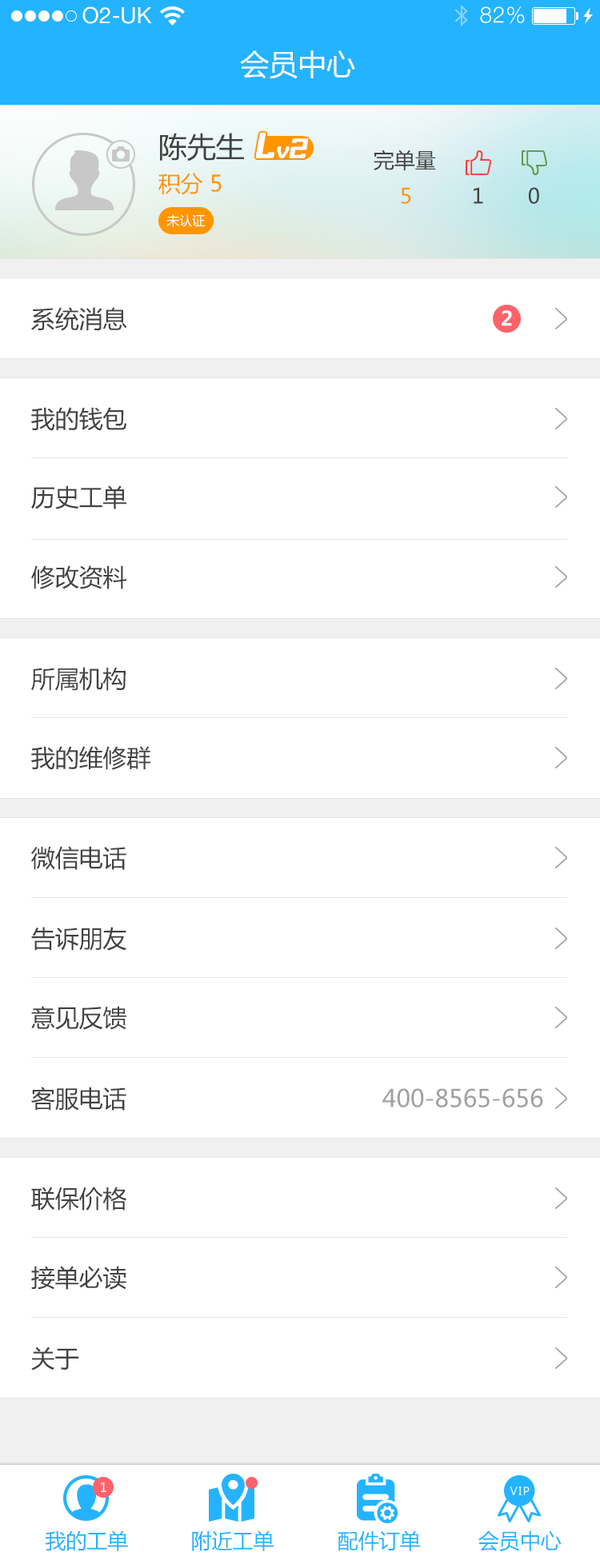
<style>
.page{position:relative;width:600px;height:1568px;background:#ffffff}
.page>*{position:absolute;margin:0}
.t1{font:28.8px "MicrosoftYaHei";color:#ffffff}
.t2{font:28.8px "MicrosoftYaHei";color:#424242}
.t3{font:31.8px "BabyUniverseItalic";letter-spacing:-0.01em;color:#fffefe}
.t4{font:19.5px "BabyUniverseItalic";letter-spacing:0.05em;color:#fffefe}
.t5{font:24.4px "BabyUniverseItalic";letter-spacing:0.05em;color:#fffefe}
.t6{font:20.8px "MicrosoftYaHei";color:#424242}
.t7{font:22.4px "MicrosoftYaHei";color:#ff9600}
.t8{font:20.8px "MicrosoftYaHei";color:#ff9600}
.t9{font:13px "MicrosoftYaHei";color:#ffffff}
.t10{font:24px "MicrosoftYaHei";color:#424242}
.t11{font:19.8px "MicrosoftYaHei-Bold";color:#ffffff}
.t12{font:24px "MicrosoftYaHei";color:#a0a0a0}
.t13{font:12.8px "MicrosoftYaHei";color:#ffffff}
.t14{font:20.8px "MicrosoftYaHei";color:#24b3ff}
</style>
<div class="page">
<p class="t1" style="left:240px;top:50px;width:115px;height:29px">会员中心</p>
<p class="t2" style="left:160px;top:133px;width:84px;height:29px">陈先生</p>
<p class="t3" style="left:255px;top:132px;width:54px;height:26px">L<span class="t4">v</span><span class="t5">2</span></p>
<p class="t6" style="left:373px;top:150px;width:63px;height:20px">完单量</p>
<p class="t7" style="left:158px;top:173px;width:63px;height:22px">积分 5</p>
<p class="t8" style="left:401px;top:187px;width:10px;height:17px">5</p>
<p class="t6" style="left:473px;top:187px;width:10px;height:17px">1</p>
<p class="t6" style="left:529px;top:187px;width:10px;height:17px">0</p>
<p class="t9" style="left:166px;top:214px;width:39px;height:13px">未认证</p>
<p class="t10" style="left:31px;top:307px;width:96px;height:24px">系统消息</p>
<p class="t11" style="left:501px;top:310px;width:11px;height:16px">2</p>
<p class="t10" style="left:31px;top:407px;width:95px;height:24px">我的钱包</p>
<p class="t10" style="left:31px;top:485px;width:95px;height:24px">历史工单</p>
<p class="t10" style="left:31px;top:565px;width:95px;height:24px">修改资料</p>
<p class="t10" style="left:31px;top:667px;width:95px;height:24px">所属机构</p>
<p class="t10" style="left:31px;top:746px;width:119px;height:24px">我的维修群</p>
<p class="t10" style="left:31px;top:846px;width:95px;height:24px">微信电话</p>
<p class="t10" style="left:31px;top:927px;width:95px;height:24px">告诉朋友</p>
<p class="t10" style="left:31px;top:1006px;width:95px;height:24px">意见反馈</p>
<p class="t12" style="left:31px;top:1087px;width:512px;height:24px"><span class="t10">客服电话                                    </span>400-8565-656</p>
<p class="t10" style="left:31px;top:1187px;width:95px;height:24px">联保价格</p>
<p class="t10" style="left:31px;top:1266px;width:95px;height:24px">接单必读</p>
<p class="t10" style="left:31px;top:1347px;width:48px;height:24px">关于</p>
<p class="t13" style="left:101px;top:1482px;width:5px;height:10px">1</p>
<p class="t14" style="left:45px;top:1530px;width:83px;height:21px">我的工单</p>
<p class="t14" style="left:192px;top:1530px;width:81px;height:21px">附近工单</p>
<p class="t14" style="left:337px;top:1530px;width:84px;height:21px">配件订单</p>
<p class="t14" style="left:478px;top:1530px;width:83px;height:21px">会员中心</p>
</div>
